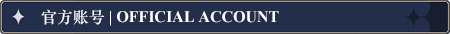
<style>
.page{position:relative;width:450px;height:34px;background:#232f4a}
.page>*{position:absolute;margin:0}
.t1{font:16px "TimesNewRomanPS-BoldMT";color:#ffffff}
.t2{font:16px "STZhongsong";color:#ffffff}
</style>
<div class="page">
<p class="t1" style="left:41px;top:9px;width:238px;height:17px"><span class="t2">官方账号</span> | OFFICIAL ACCOUNT</p>
</div>
